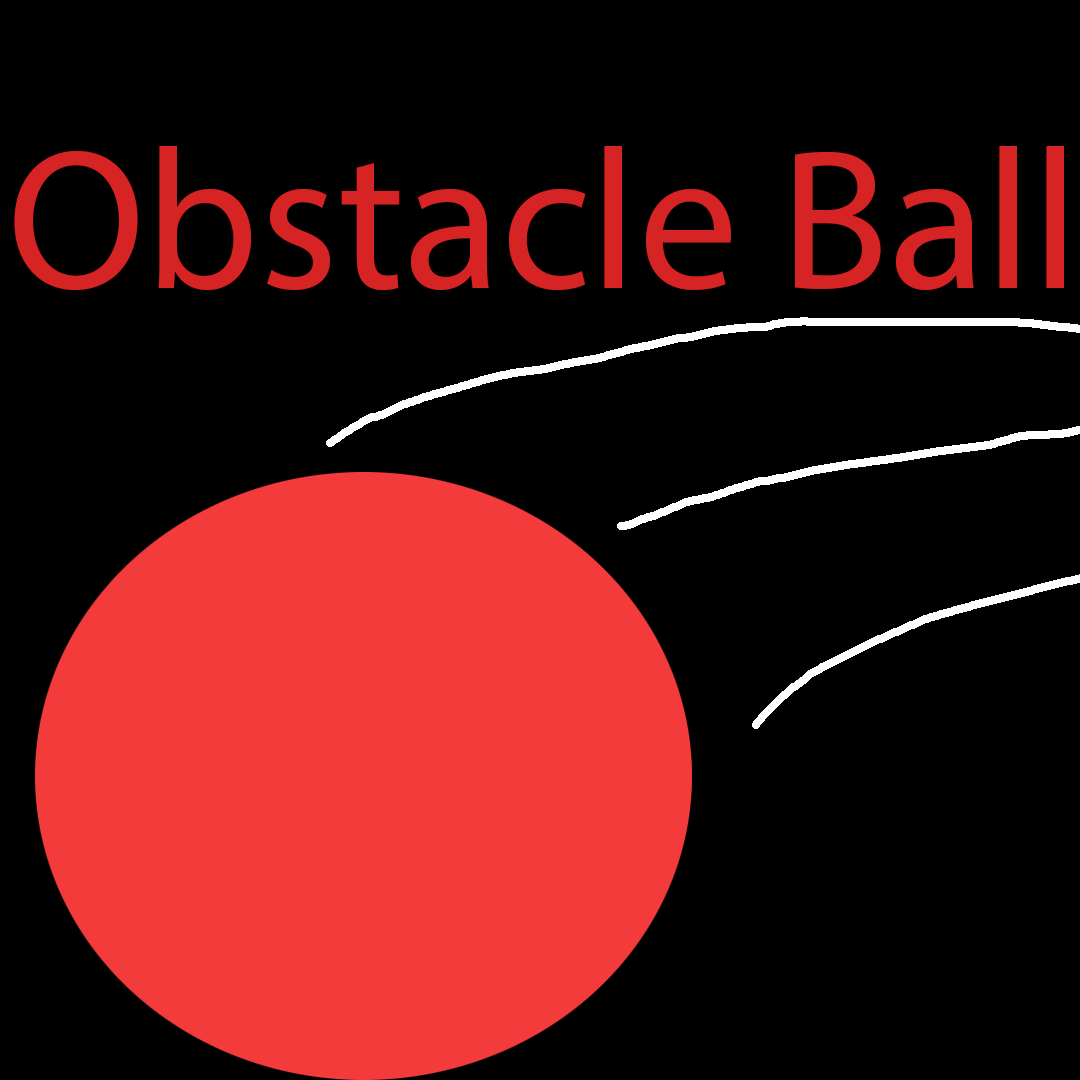
<style>
.page{position:relative;width:1080px;height:1080px;background:#000000}
.page>*{position:absolute;margin:0}
.t1{font:200px "MyriadPro-Regular";color:#d62323}
</style>
<div class="page">
<p class="t1" style="left:14px;top:146px;width:1050px;height:145px">Obstacle Ball</p>
</div>
